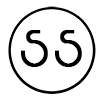
<style>
.page{position:relative;width:100px;height:100px;background:#ffffff}
.page>*{position:absolute;margin:0}
.t1{font:52px "PoochDoo";color:#000000;font-weight:bold}
</style>
<div class="page">
<p class="t1" style="left:21px;top:30px;width:27px;height:37px">S</p>
<p class="t1" style="left:55px;top:30px;width:27px;height:37px">S</p>
</div>
